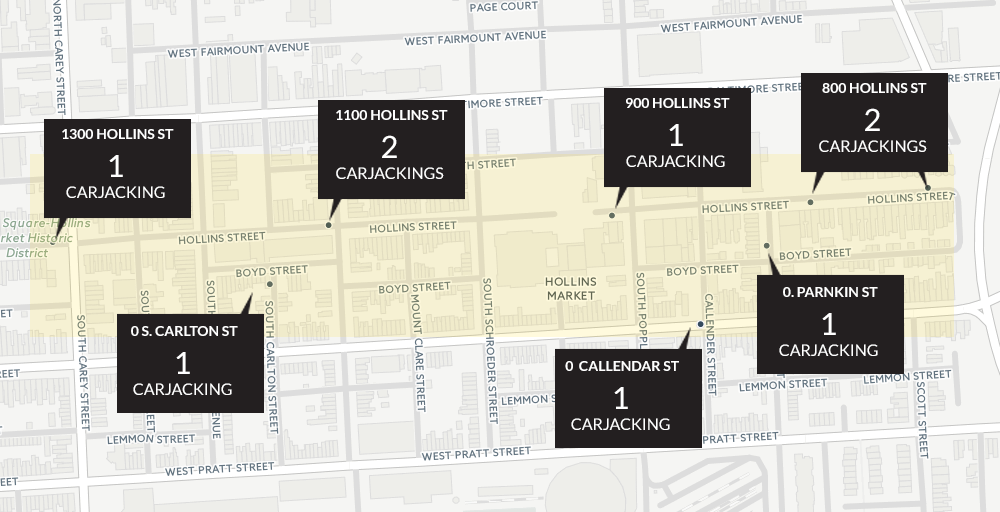
<style>
.page{position:relative;width:1000px;height:512px;background:#f5f5f3}
.page>*{position:absolute;margin:0}
.t1{font:14px "Lato-Bold";color:#ffffff}
.t2{font:16px/21.7px "Lato-Regular";color:#ffffff}
.t3{font:30.8px/21.7px "Lato-Regular";color:#ffffff}
</style>
<div class="page">
<p class="t1" style="left:822px;top:83px;width:105px;height:10px">800 HOLLINS ST</p>
<p class="t1" style="left:626px;top:98px;width:104px;height:10px">900 HOLLINS ST</p>
<p class="t1" style="left:336px;top:110px;width:112px;height:10px">1100 HOLLINS ST</p>
<p class="t2" style="left:819px;top:108px;width:108px;height:44px;text-align:center"><span class="t3">2<br></span>CARJACKINGS</p>
<p class="t2" style="left:626px;top:124px;width:99px;height:43px;text-align:center"><span class="t3">1<br></span>CARJACKING</p>
<p class="t1" style="left:62px;top:129px;width:112px;height:10px">1300 HOLLINS ST</p>
<p class="t2" style="left:336px;top:135px;width:108px;height:44px;text-align:center"><span class="t3">2<br></span>CARJACKINGS</p>
<p class="t2" style="left:66px;top:155px;width:99px;height:43px;text-align:center"><span class="t3">1<br></span>CARJACKING</p>
<p class="t1" style="left:783px;top:287px;width:95px;height:10px">0. PARNKIN ST</p>
<p class="t2" style="left:779px;top:313px;width:99px;height:43px;text-align:center"><span class="t3">1<br></span>CARJACKING</p>
<p class="t1" style="left:131px;top:326px;width:107px;height:10px">0 S. CARLTON ST</p>
<p class="t2" style="left:133px;top:352px;width:99px;height:43px;text-align:center"><span class="t3">1<br></span>CARJACKING</p>
<p class="t1" style="left:565px;top:361px;width:114px;height:10px">0  CALLENDAR ST</p>
<p class="t2" style="left:571px;top:387px;width:99px;height:43px;text-align:center"><span class="t3">1<br></span>CARJACKING</p>
</div>
